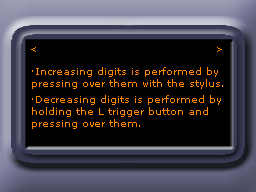
<style>
.page{position:relative;width:256px;height:192px;background:#000000}
.page>*{position:absolute;margin:0}
.t1{font:9px "MSReferenceSansSerif";color:#ff8400}
.t2{font:10px "MSReferenceSansSerif";color:#ff8400}
.t3{font:10px/16px "MSReferenceSansSerif";color:#ff8400}
</style>
<div class="page">
<p class="t1" style="left:31px;top:47px;width:5px;height:5px">&lt;</p>
<p class="t1" style="left:217px;top:47px;width:5px;height:5px">&gt;</p>
<p class="t2" style="left:32px;top:67px;width:191px;height:62px">·Increasing digits is performed by <br>pressing over them with the stylus.<br><span class="t3">·Decreasing digits is performed by<br></span>holding the L trigger button and <br>pressing over them.</p>
</div>
